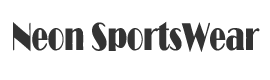
<style>
.page{position:relative;width:270px;height:80px;background:#ffffff}
.page>*{position:absolute;margin:0}
.t1{font:40px "Broadway";color:#333333;scale:0.68 1}
</style>
<div class="page">
<p class="t1" style="left:13px;top:21px;width:247px;height:31px">Neon SportsWear</p>
</div>
